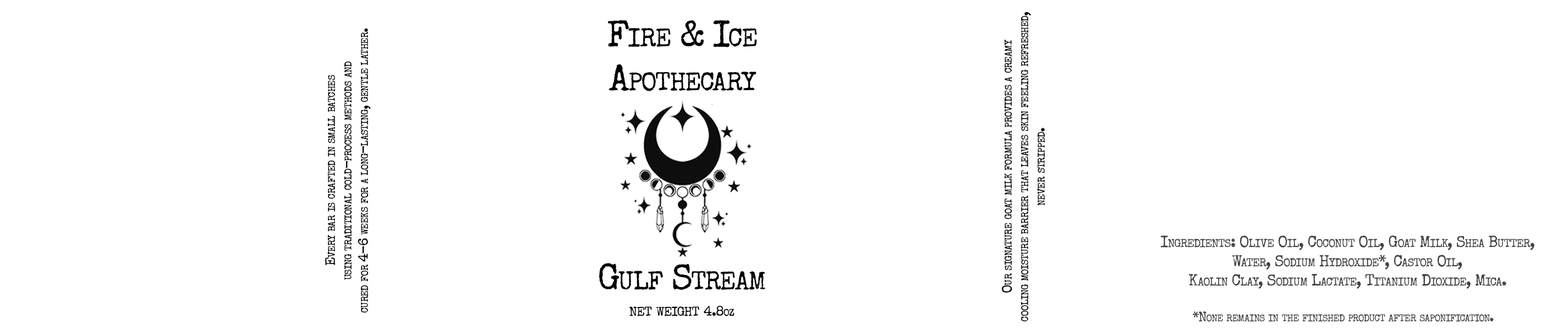
<style>
.page{position:relative;width:1568px;height:330px;background:#ffffff}
.page>*{position:absolute;margin:0}
.t1{font:13.8px "SpecialElite-Regular";letter-spacing:-0.04em;color:#000000;font-variant:small-caps}
.t2{font:36.7px "SpecialElite-Regular";letter-spacing:-0.04em;color:#000000;font-variant:small-caps}
.t3{font:16px "SpecialElite-Regular";letter-spacing:-0.04em;color:#414141;font-variant:small-caps}
.t4{font:18.3px "SpecialElite-Regular";letter-spacing:-0.04em;color:#000000;font-variant:small-caps}
.t5{font:13.8px "SpecialElite-Regular";letter-spacing:-0.04em;color:#414141;font-variant:small-caps}
</style>
<div class="page">
<p class="t1" style="left:1001px;top:12px;width:44px;height:310px;text-align:center;rotate:-90deg">Our signature goat milk formula provides a creamy<br>cooling moisture barrier that leaves skin feeling refreshed,<br>never stripped.</p>
<p class="t1" style="left:325px;top:28px;width:46px;height:285px;text-align:center;rotate:-90deg">Every bar is crafted in small batches<br> using traditional cold-process methods and <br>cured for 4-6 weeks for a long-lasting, gentle lather.</p>
<p class="t2" style="left:608px;top:20px;width:149px;height:71px;text-align:center">Fire &amp; Ice<br>Apothecary</p>
<p class="t3" style="left:1160px;top:235px;width:374px;height:54px;text-align:center">Ingredients: Olive Oil, Coconut Oil, Goat Milk, Shea Butter,<br> Water, Sodium Hydroxide*, Castor Oil, <br>Kaolin Clay, Sodium Lactate, Titanium Dioxide, Mica.</p>
<p class="t2" style="left:599px;top:263px;width:166px;height:27px">Gulf Stream</p>
<p class="t4" style="left:629px;top:305px;width:105px;height:11px">net weight <span class="t1">4.8oz</span></p>
<p class="t5" style="left:1192px;top:311px;width:302px;height:11px">*None remains in the finished product after saponification.</p>
</div>
